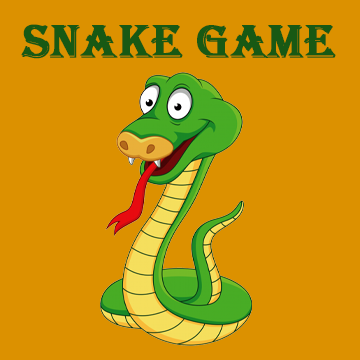
<style>
.page{position:relative;width:360px;height:360px;background:#dc9100}
.page>*{position:absolute;margin:0}
.t1{font:48px "Algerian";color:#185914;font-weight:bold}
</style>
<div class="page">
<p class="t1" style="left:21px;top:24px;width:315px;height:35px">Snake Game</p>
</div>
